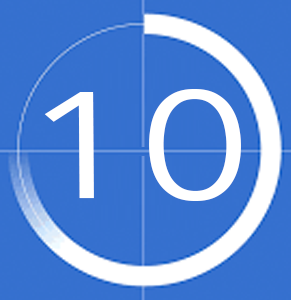
<style>
.page{position:relative;width:291px;height:300px;background:#3570ce}
.page>*{position:absolute;margin:0}
.t1{font:150.5px "AvenirNext-Regular";color:#ffffff;scale:1.32 1}
</style>
<div class="page">
<p class="t1" style="left:44px;top:89px;width:197px;height:112px">10</p>
</div>
